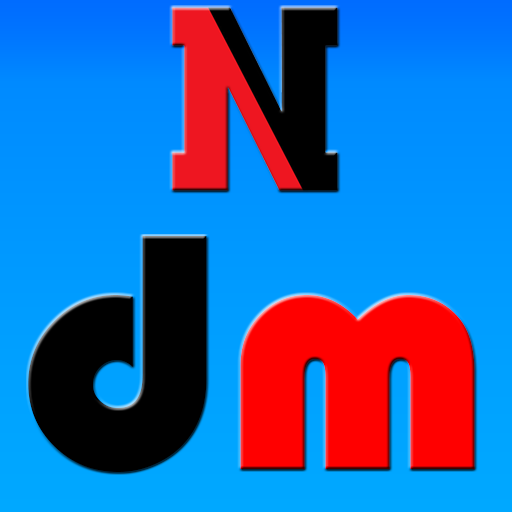
<style>
.page{position:relative;width:512px;height:512px}
.page>*{position:absolute;margin:0}
.t1{font:350px "Bauhaus93";color:#000000}
.t2{font:350px "Bauhaus93";color:#ff0000}
</style>
<div class="page">
<p class="t1" style="left:28px;top:236px;width:447px;height:236px">d<span class="t2">m</span></p>
</div>
